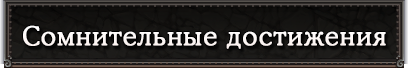
<style>
.page{position:relative;width:408px;height:68px}
.page>*{position:absolute;margin:0}
.t1{font:26px "CooperLightCBT";letter-spacing:0.03em;color:#ffffff;font-weight:bold}
</style>
<div class="page">
<p class="t1" style="left:23px;top:25px;width:363px;height:24px">Сомнительные достижения</p>
</div>
